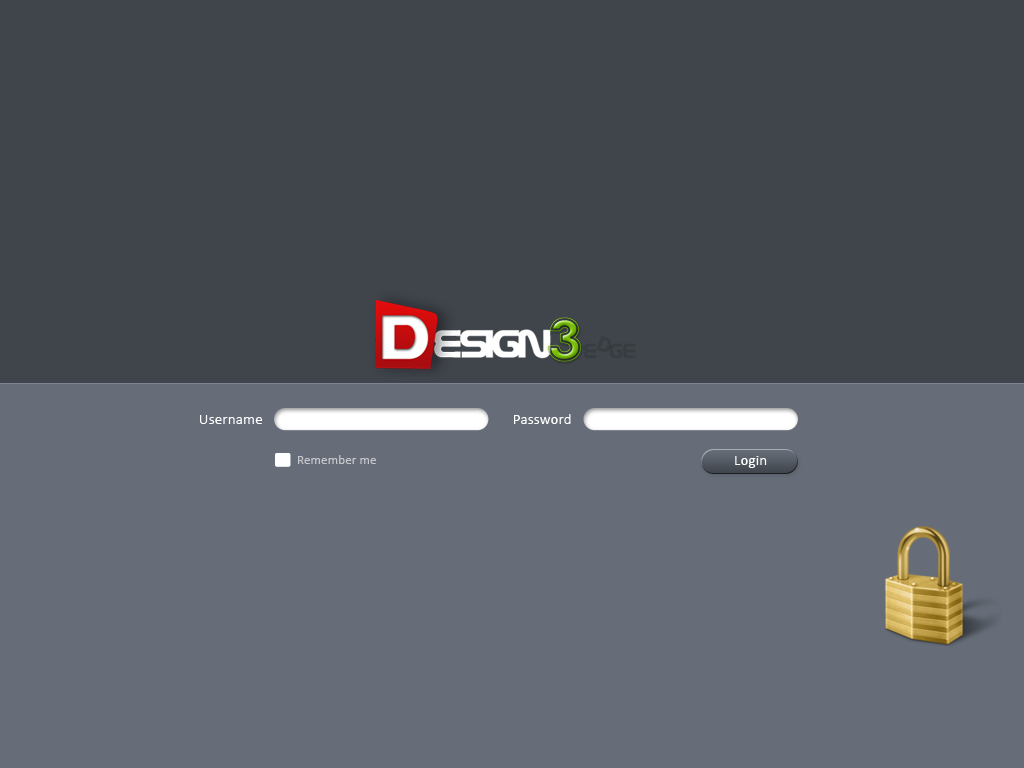
<style>
.page{position:relative;width:1024px;height:768px;background:#40454c}
.page>*{position:absolute;margin:0}
.t1{font:15px "Calibri";letter-spacing:0.01em;color:#ffffff}
.t2{font:13px "Calibri";letter-spacing:0.01em;color:#c5c7ca}
</style>
<div class="page">
<p class="t1" style="left:514px;top:414px;width:57px;height:10px">Password</p>
<p class="t1" style="left:200px;top:415px;width:63px;height:9px">Username</p>
<p class="t2" style="left:298px;top:455px;width:78px;height:9px">Remember me</p>
<p class="t1" style="left:735px;top:456px;width:32px;height:12px">Login</p>
</div>
